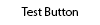
<style>
.page{position:relative;width:100px;height:25px;background:#ffffff}
.page>*{position:absolute;margin:0}
.t1{font:12px "MyriadPro-Regular";color:#000000}
</style>
<div class="page">
<p class="t1" style="left:21px;top:7px;width:57px;height:9px">Test Button</p>
</div>
